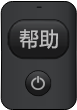
<style>
.page{position:relative;width:77px;height:110px}
.page>*{position:absolute;margin:0}
.t1{font:20px "MicrosoftYaHei";color:#bdbdbd}
</style>
<div class="page">
<p class="t1" style="left:19px;top:29px;width:39px;height:20px">帮助</p>
</div>
